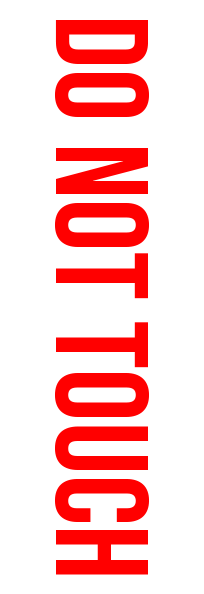
<style>
.page{position:relative;width:204px;height:594px;background:#ffffff}
.page>*{position:absolute;margin:0}
.t1{font:131.8px "BebasNeue-Regular";color:#ff0000}
</style>
<div class="page">
<p class="t1" style="left:54px;top:20px;width:95px;height:555px;rotate:90deg">do not touch</p>
</div>
